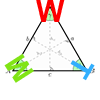
<style>
.page{position:relative;width:100px;height:100px;background:#ffffff}
.page>*{position:absolute;margin:0}
.t1{font:30px "Arial-BoldMT";letter-spacing:-0.025em;color:#fd0000}
.t2{font:30px "Arial-BoldMT";letter-spacing:-0.025em;color:#81e416}
.t3{font:30px "Arial-BoldMT";letter-spacing:-0.025em;color:#32affe}
</style>
<div class="page">
<p class="t1" style="left:36px;top:0px;width:29px;height:22px">W</p>
<p class="t2" style="left:4px;top:53px;width:30px;height:30px;rotate:-123deg">M</p>
<p class="t3" style="left:70px;top:60px;width:25px;height:21px;rotate:120deg">T</p>
</div>
